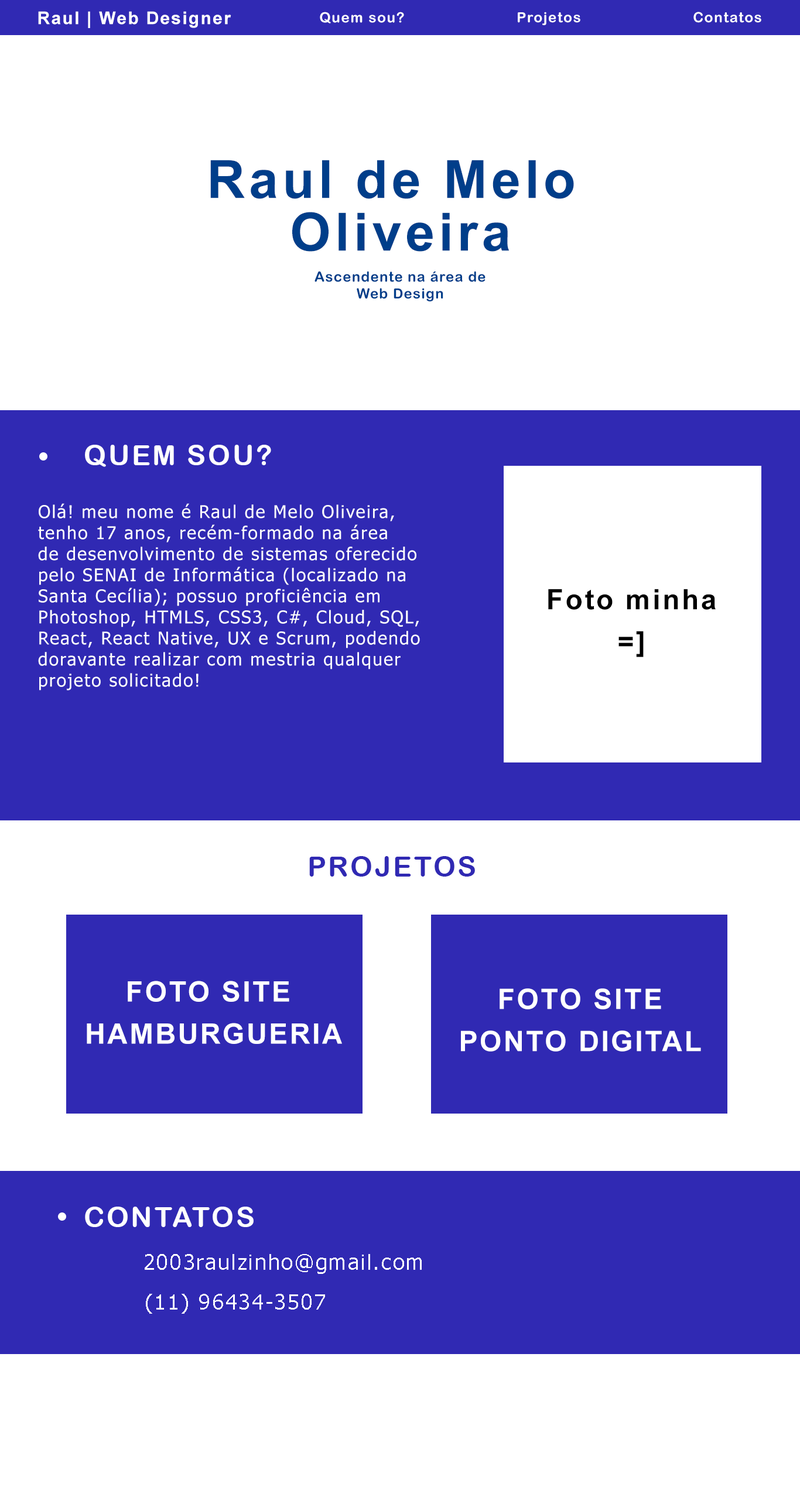
<style>
.page{position:relative;width:800px;height:1491px;background:#ffffff}
.page>*{position:absolute;margin:0}
.t1{font:17.6px "Arial-BoldMT";letter-spacing:0.075em;color:#ffffff}
.t2{font:14px "ArialRoundedMTBold";letter-spacing:0.075em;color:#ffffff}
.t3{font:52.7px/52.7px "Arial-BoldMT";letter-spacing:0.075em;color:#003e8a}
.t4{font:14px "ArialRoundedMTBold";letter-spacing:0.05em;color:#003e8a}
.t5{font:28.1px "ArialRoundedMTBold";letter-spacing:0.075em;color:#ffffff}
.t6{font:17.6px/21.1px "Tahoma";letter-spacing:0.075em;color:#ffffff}
.t7{font:28.1px/42.1px "Arial-BoldMT";letter-spacing:0.075em;color:#000000}
.t8{font:28.1px "ArialRoundedMTBold";letter-spacing:0.075em;color:#3029b3}
.t9{font:28.1px/42.1px "Arial-BoldMT";letter-spacing:0.075em;color:#ffffff}
.t10{font:21.1px "Tahoma";letter-spacing:0.075em;color:#ffffff}
</style>
<div class="page">
<p class="t1" style="left:38px;top:11px;width:193px;height:17px">Raul | Web Designer</p>
<p class="t2" style="left:320px;top:12px;width:84px;height:11px">Quem sou?</p>
<p class="t2" style="left:517px;top:12px;width:63px;height:13px">Projetos</p>
<p class="t2" style="left:693px;top:12px;width:68px;height:11px">Contatos</p>
<p class="t3" style="left:210px;top:160px;width:364px;height:92px;text-align:center">Raul de Melo <br>Oliveira</p>
<p class="t4" style="left:314px;top:271px;width:171px;height:30px;text-align:center">Ascendente na área de<br>Web Design</p>
<p class="t5" style="left:85px;top:445px;width:186px;height:22px">QUEM SOU?</p>
<p class="t6" style="left:38px;top:503px;width:382px;height:188px">Olá! meu nome é Raul de Melo Oliveira,<br>tenho 17 anos, recém-formado na área<br>de desenvolvimento de sistemas oferecido<br>pelo SENAI de Informática (localizado na<br>Santa Cecília); possuo proficiência em<br>Photoshop, HTMLS, CSS3, C#, Cloud, SQL,<br>React, React Native, UX e Scrum, podendo<br>doravante realizar com mestria qualquer <br>projeto solicitado!</p>
<p class="t7" style="left:548px;top:589px;width:167px;height:68px;text-align:center">Foto minha<br>=]</p>
<p class="t8" style="left:309px;top:856px;width:166px;height:21px">PROJETOS</p>
<p class="t9" style="left:87px;top:981px;width:255px;height:63px;text-align:center">FOTO SITE <br>HAMBURGUERIA</p>
<p class="t9" style="left:461px;top:989px;width:240px;height:63px;text-align:center">FOTO SITE<br>PONTO DIGITAL</p>
<p class="t5" style="left:85px;top:1207px;width:168px;height:20px">CONTATOS</p>
<p class="t10" style="left:145px;top:1254px;width:276px;height:20px">2003raulzinho@gmail.com</p>
<p class="t10" style="left:146px;top:1294px;width:179px;height:20px">(11) 96434-3507</p>
</div>
